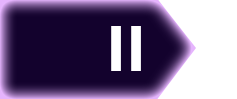
<style>
.page{position:relative;width:237px;height:99px;background:#13022d}
.page>*{position:absolute;margin:0}
.t1{font:60px "MicrosoftYaHei-Bold";color:#ffffff}
</style>
<div class="page">
<p class="t1" style="left:111px;top:26px;width:30px;height:45px">II</p>
</div>
